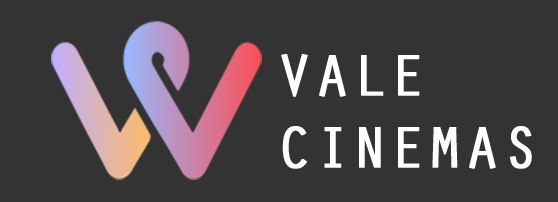
<style>
.page{position:relative;width:558px;height:202px;background:#333333}
.page>*{position:absolute;margin:0}
.t1{font:60px "OratorStd";color:#ffffff;font-weight:bold}
</style>
<div class="page">
<p class="t1" style="left:281px;top:54px;width:251px;height:115px">VALE <br>CINEMAS</p>
</div>
